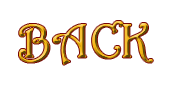
<style>
.page{position:relative;width:186px;height:100px;background:#ffffff}
.page>*{position:absolute;margin:0}
.t1{font:48px "Harrington";font-weight:bold}
</style>
<div class="page">
<p class="t1" style="left:19px;top:21px;width:134px;height:44px">BACK</p>
</div>
